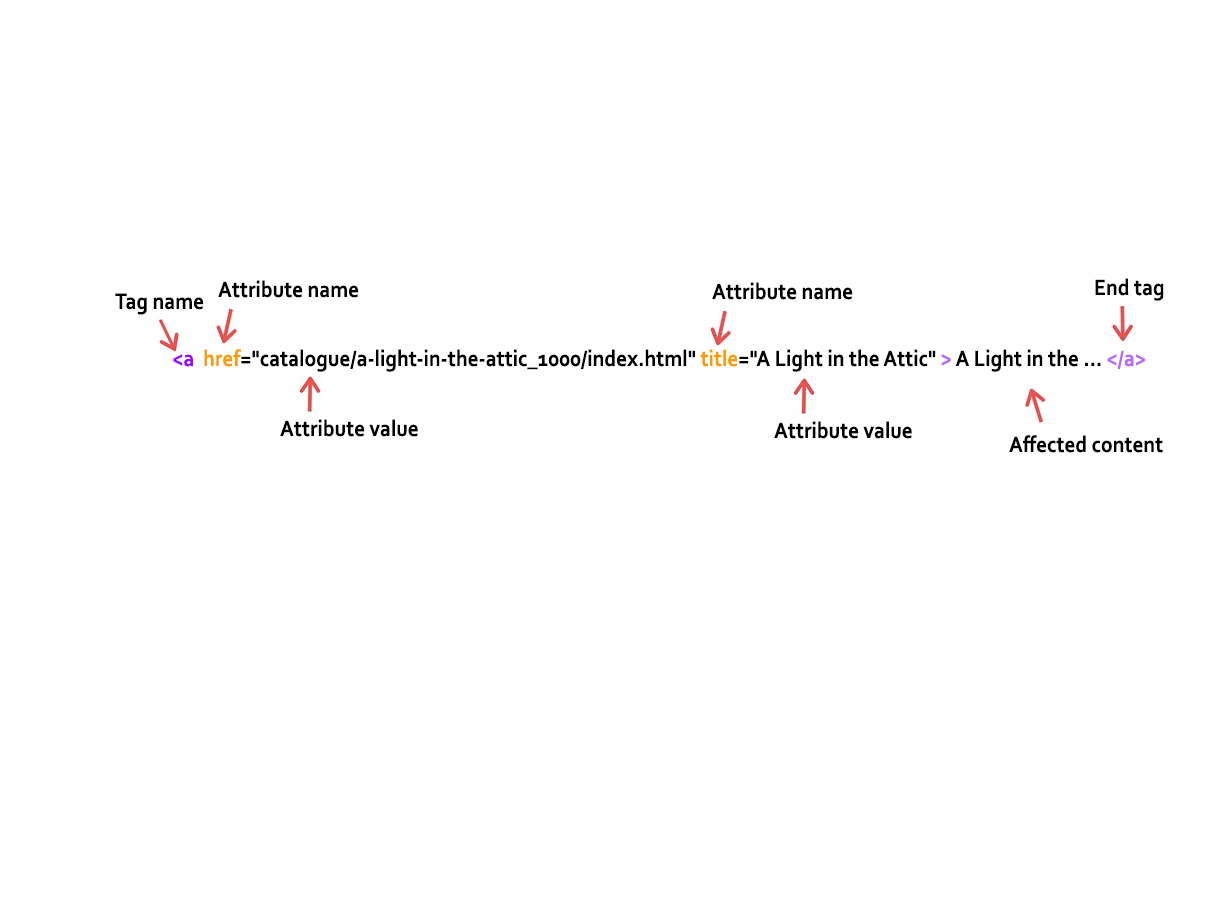
<style>
.page{position:relative;width:1219px;height:901px;background:#ffffff}
.page>*{position:absolute;margin:0}
.t1{font:23.3px "Corbel-Bold";letter-spacing:0.005em;color:#000000;scale:0.9 1}
.t2{font:23.3px "Corbel-Bold";letter-spacing:0.005em;color:#9c06fc;scale:0.9 1}
.t3{font:23.3px "Corbel-Bold";letter-spacing:0.005em;color:#fc9c05;scale:0.9 1}
.t4{font:23.3px "Corbel-Bold";letter-spacing:0.005em;color:#b768fd;scale:0.9 1}
</style>
<div class="page">
<p class="t1" style="left:218px;top:280px;width:141px;height:18px">Attribute name</p>
<p class="t1" style="left:1095px;top:278px;width:69px;height:23px">End tag</p>
<p class="t1" style="left:115px;top:293px;width:89px;height:22px">Tag name</p>
<p class="t1" style="left:712px;top:282px;width:141px;height:18px">Attribute name</p>
<p class="t1" style="left:173px;top:349px;width:972px;height:23px"><span class="t2">&lt;a  </span><span class="t3">href</span>="catalogue/a-light-in-the-attic_1000/index.html" <span class="t3">title</span>="A Light in the Attic" <span class="t4">&gt; </span>A Light in the ... <span class="t4">&lt;/a&gt;</span></p>
<p class="t1" style="left:280px;top:419px;width:138px;height:18px">Attribute value</p>
<p class="t1" style="left:774px;top:421px;width:138px;height:18px">Attribute value</p>
<p class="t1" style="left:1009px;top:435px;width:154px;height:18px">Affected content</p>
</div>
